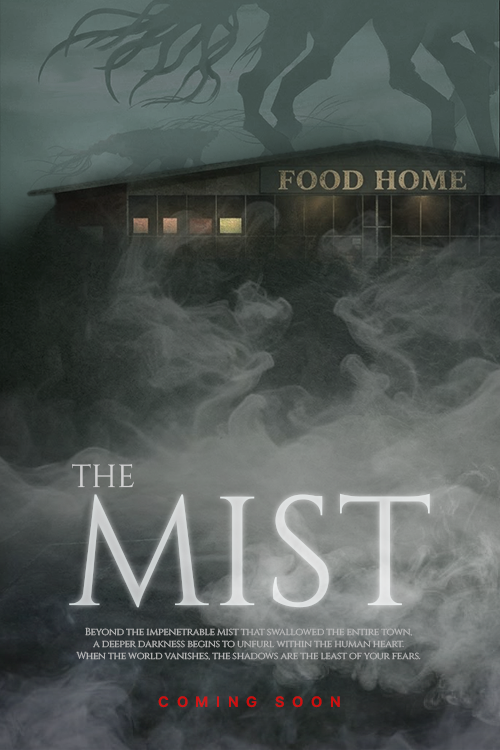
<style>
.page{position:relative;width:500px;height:750px}
.page>*{position:absolute;margin:0}
.t1{font:31.8px "Cinzel-Regular";color:#d0d0d0}
.t2{font:154.6px "Cinzel-Regular";color:#d6d8d8}
.t3{font:10px/12px "Cinzel-Regular";letter-spacing:-0.025em;color:#bbbbbb}
.t4{font:15px "Pretendard-Bold";letter-spacing:0.5em;color:#cf1010}
</style>
<div class="page">
<p class="t1" style="left:72px;top:464px;width:62px;height:24px">THE</p>
<p class="t2" style="left:69px;top:493px;width:361px;height:115px">MIST</p>
<p class="t3" style="left:76px;top:627px;width:345px;height:33px;text-align:center">Beyond the impenetrable mist that swallowed the entire town,<br>a deeper darkness begins to unfurl within the human heart.<br>When the world vanishes, the shadows are the least of your fears.</p>
<p class="t4" style="left:158px;top:696px;width:182px;height:12px">COMING SOON</p>
</div>
